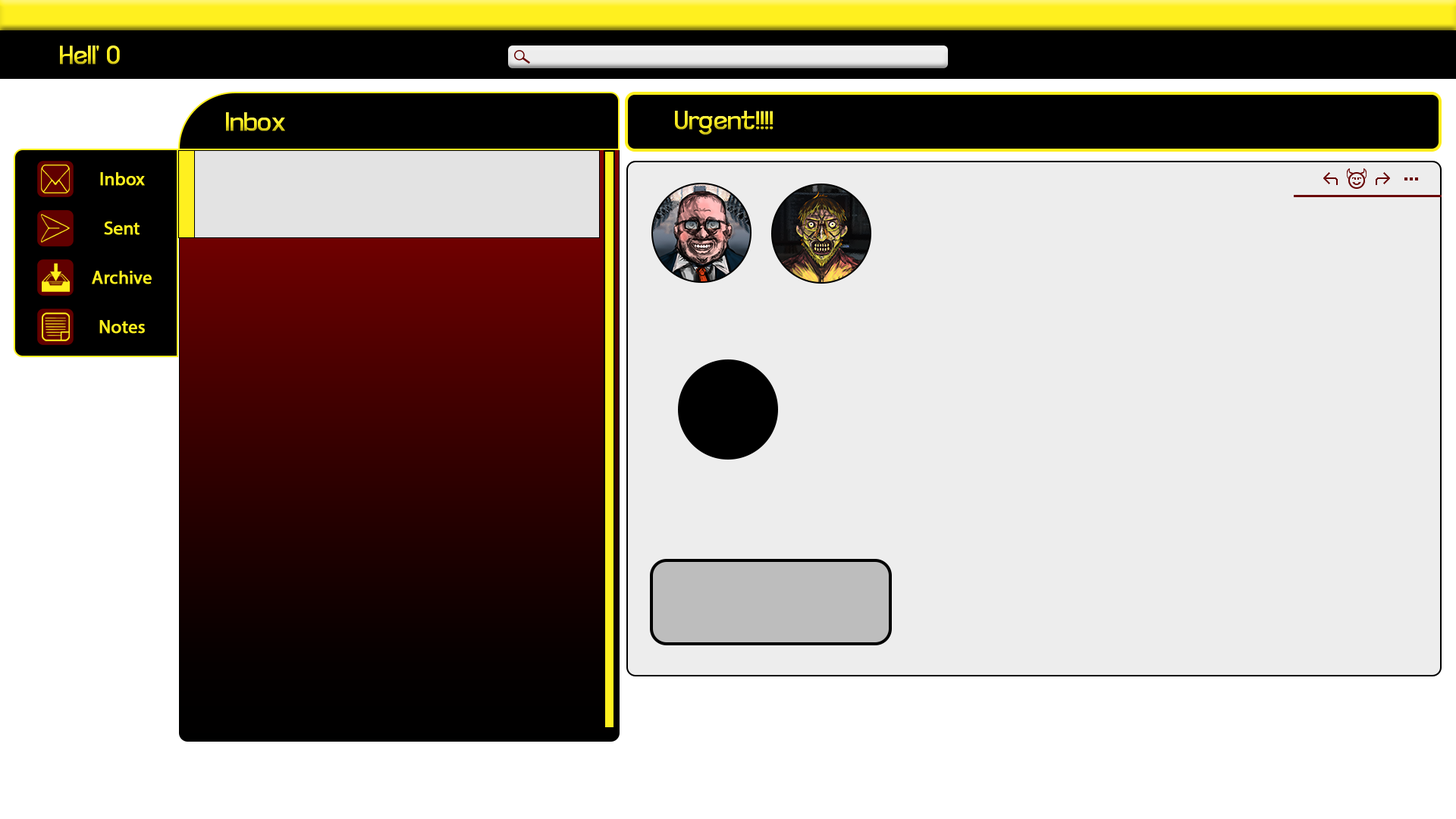
<style>
.page{position:relative;width:1456px;height:819px;background:#ededed}
.page>*{position:absolute;margin:0}
.t1{font:27.3px "Teknaf-Regular";font-weight:bold}
.t2{font:18.2px "MyriadPro-Regular";color:#fff01f;font-weight:bold}
</style>
<div class="page">
<p class="t1" style="left:226px;top:112px;width:59px;height:19px">Inbox</p>
<p class="t1" style="left:675px;top:111px;width:98px;height:24px">Urgent!!!!</p>
<p class="t2" style="left:100px;top:172px;width:45px;height:14px">Inbox</p>
<p class="t2" style="left:104px;top:221px;width:36px;height:14px">Sent</p>
<p class="t2" style="left:92px;top:271px;width:60px;height:13px">Archive</p>
<p class="t2" style="left:99px;top:320px;width:46px;height:14px">Notes</p>
</div>
